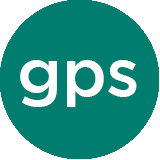
<style>
.page{position:relative;width:160px;height:160px;background:#007d6e}
.page>*{position:absolute;margin:0}
.t1{font:67px "GothamMedium";color:#ffffff}
</style>
<div class="page">
<p class="t1" style="left:20px;top:60px;width:117px;height:47px">gps</p>
</div>
